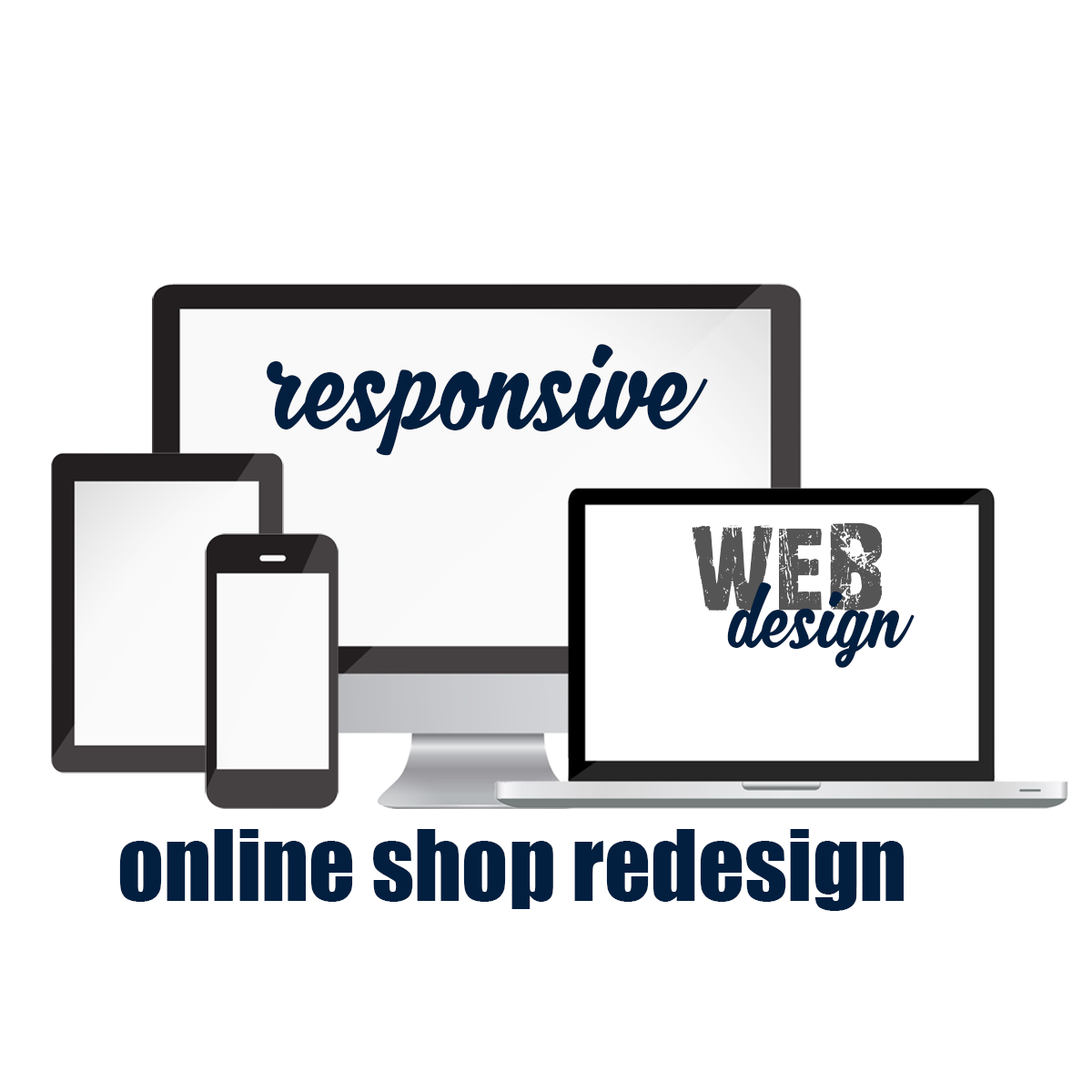
<style>
.page{position:relative;width:1092px;height:1092px;background:#ffffff}
.page>*{position:absolute;margin:0}
.t1{font:137.1px "MJZhafiraDemo";color:#021f40}
.t2{font:114.2px "28DaysLater";color:#555555}
.t3{font:91.4px "MJZhafiraDemo";color:#021f40}
.t4{font:91px "Impact";color:#021f40}
</style>
<div class="page">
<p class="t1" style="left:267px;top:344px;width:441px;height:112px">responsive</p>
<p class="t2" style="left:692px;top:522px;width:191px;height:89px">WEB</p>
<p class="t3" style="left:727px;top:582px;width:188px;height:86px">design</p>
<p class="t4" style="left:119px;top:829px;width:785px;height:82px">online shop redesign</p>
</div>
